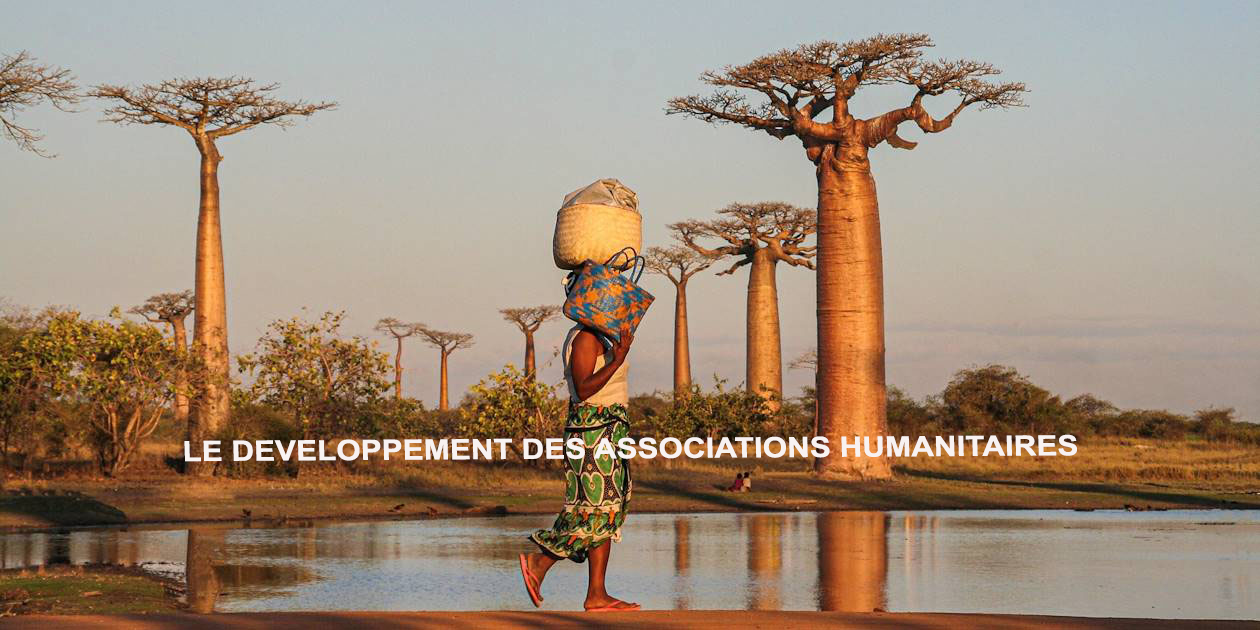
<style>
.page{position:relative;width:1260px;height:630px}
.page>*{position:absolute;margin:0}
.t1{font:28px "Arial-BoldMT";color:#f8f2f1;scale:1.12 1}
</style>
<div class="page">
<p class="t1" style="left:184px;top:434px;width:893px;height:28px">LE DEVELOPPEMENT DES ASSOCIATIONS HUMANITAIRES</p>
</div>
